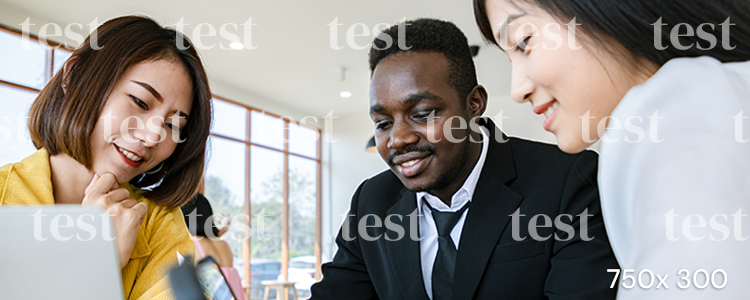
<style>
.page{position:relative;width:750px;height:300px}
.page>*{position:absolute;margin:0}
.t1{font:52.2px "DMSerifDisplay-Regular"}
.t2{font:52.2px "DMSerifDisplay-Regular";color:#8b8c8b}
.t3{font:52.2px "DMSerifDisplay-Regular";color:#ffffff}
.t4{font:52.2px "DMSerifDisplay-Regular";color:#8e9497}
.t5{font:52.2px "DMSerifDisplay-Regular";color:#898e8f}
.t6{font:26.7px "DMSans-Medium";color:#ffffff}
</style>
<div class="page">
<p class="t1" style="left:18px;top:16px;width:87px;height:34px">test</p>
<p class="t1" style="left:496px;top:16px;width:87px;height:34px">test</p>
<p class="t2" style="left:650px;top:16px;width:87px;height:34px">test</p>
<p class="t1" style="left:100px;top:109px;width:87px;height:34px">test</p>
<p class="t1" style="left:253px;top:109px;width:87px;height:34px">test</p>
<p class="t1" style="left:423px;top:109px;width:87px;height:34px">test</p>
<p class="t3" style="left:578px;top:109px;width:87px;height:34px">test</p>
<p class="t3" style="left:30px;top:207px;width:87px;height:34px">test</p>
<p class="t4" style="left:338px;top:207px;width:87px;height:34px">test</p>
<p class="t5" style="left:508px;top:207px;width:87px;height:34px">test</p>
<p class="t3" style="left:662px;top:207px;width:87px;height:34px">test</p>
<p class="t6" style="left:607px;top:269px;width:121px;height:20px">750x 300</p>
</div>
